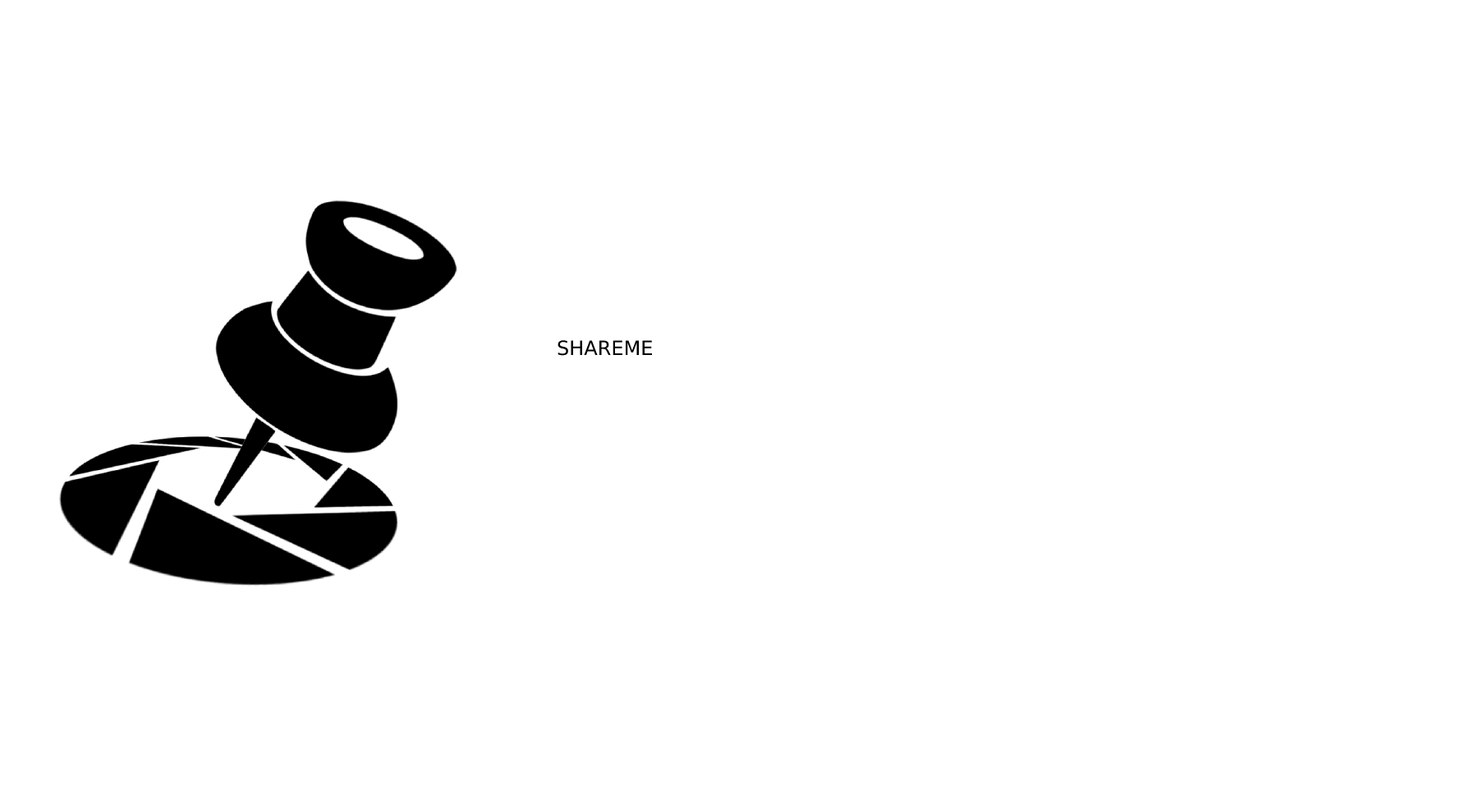
<style>
.page{position:relative;width:1478px;height:807px;background:#ffffff}
.page>*{position:absolute;margin:0}
.t1{font:19.7px "DejaVuSans";color:#000000}
</style>
<div class="page">
<p class="t1" style="left:558px;top:340px;width:94px;height:16px">SHAREME</p>
</div>
